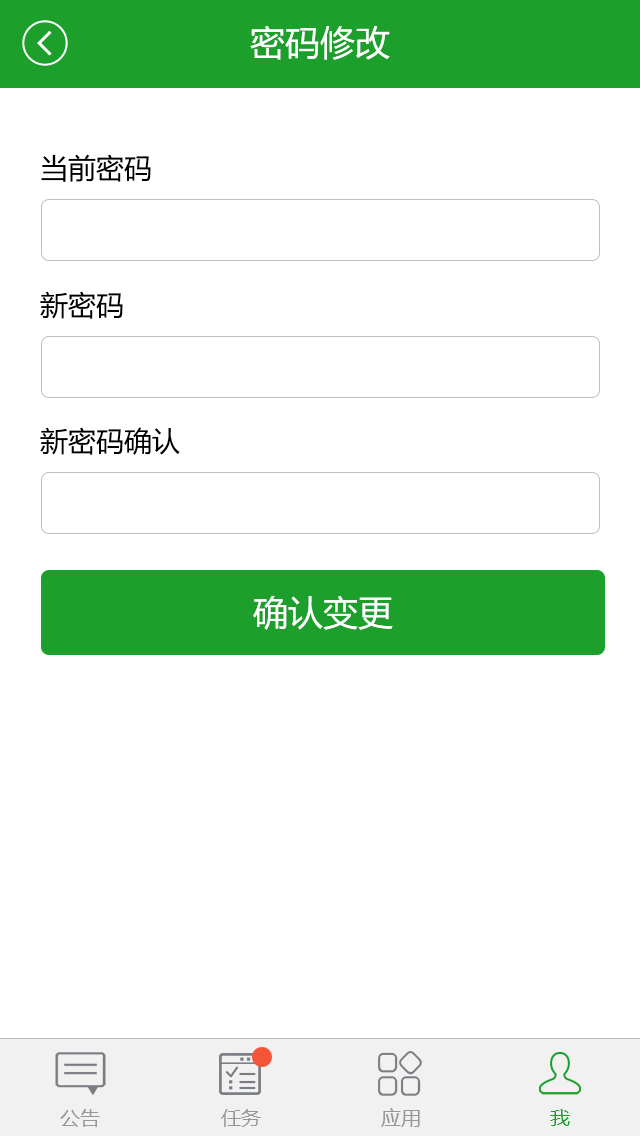
<style>
.page{position:relative;width:640px;height:1136px;background:#ffffff}
.page>*{position:absolute;margin:0}
.t1{font:35px "MicrosoftYaHei";color:#ffffff}
.t2{font:28px "MicrosoftYaHei";color:#000000}
.t3{font:20px "MicrosoftYaHei";color:#979798}
.t4{font:20px "MicrosoftYaHei";color:#1da02b}
</style>
<div class="page">
<p class="t1" style="left:250px;top:25px;width:140px;height:35px">密码修改</p>
<p class="t2" style="left:41px;top:154px;width:110px;height:28px">当前密码</p>
<p class="t2" style="left:40px;top:291px;width:83px;height:28px">新密码</p>
<p class="t2" style="left:40px;top:427px;width:140px;height:28px">新密码确认</p>
<p class="t1" style="left:253px;top:595px;width:140px;height:35px">确认变更</p>
<p class="t3" style="left:60px;top:1109px;width:40px;height:18px">公告</p>
<p class="t3" style="left:221px;top:1109px;width:40px;height:18px">任务</p>
<p class="t3" style="left:381px;top:1108px;width:39px;height:19px">应用</p>
<p class="t4" style="left:550px;top:1109px;width:20px;height:17px">我</p>
</div>
